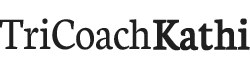
<style>
.page{position:relative;width:250px;height:70px;background:#ffffff}
.page>*{position:absolute;margin:0}
.t1{font:48px "Neuton-Regular";color:#1f1f1f;scale:0.92 1}
.t2{font:48px "Neuton-Regular";color:#1f1f1f;font-weight:bold;scale:0.92 1}
</style>
<div class="page">
<p class="t1" style="left:0px;top:18px;width:250px;height:33px">TriCoach<span class="t2">Kathi</span></p>
</div>
